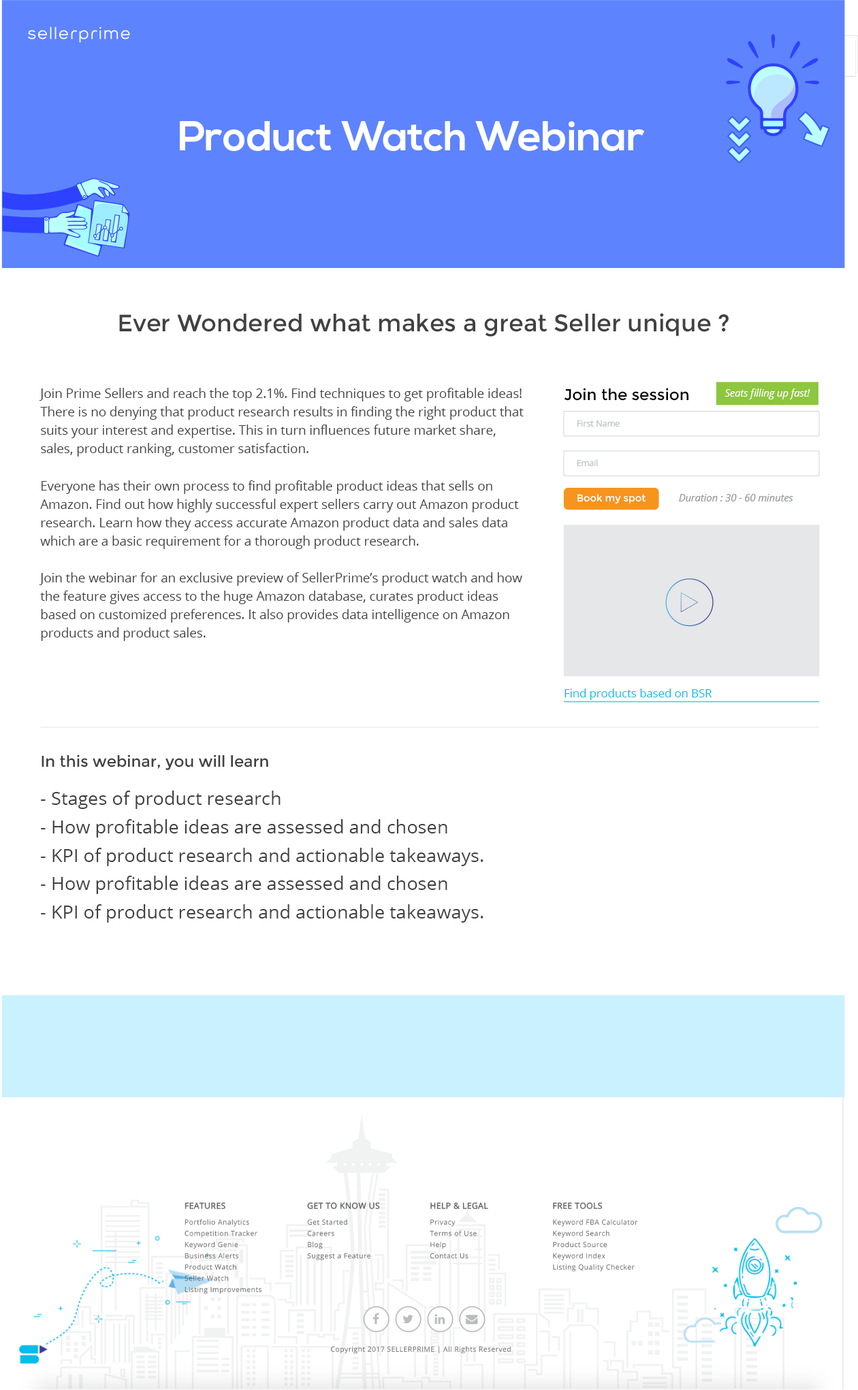
<style>
.page{position:relative;width:858px;height:1390px;background:#ffffff}
.page>*{position:absolute;margin:0}
.t1{font:41.4px "NexaBold";color:#ffffff}
.t2{font:23.9px "Montserrat-Regular";color:#414042}
.t3{font:12.8px/18.4px "OpenSans";color:#414042}
.t4{font:15.6px "Montserrat-Regular";color:#000000}
.t5{font:9.9px "OpenSans-Italic";color:#ffffff}
.t6{font:8.5px "OpenSans";color:#bcbec0}
.t7{font:9.9px "Montserrat-Regular";color:#ffffff}
.t8{font:9.9px "OpenSans-Italic";color:#939598}
.t9{font:11.3px "OpenSans";color:#06bbe5}
.t10{font:15.6px "Montserrat-Regular";color:#414042}
.t11{font:18.4px/28.4px "OpenSans";color:#414042}
</style>
<div class="page">
<p class="t1" style="left:180px;top:121px;width:465px;height:30px">Product Watch Webinar</p>
<p class="t2" style="left:119px;top:313px;width:609px;height:24px">Ever Wondered what makes a great Seller unique ?</p>
<p class="t3" style="left:39px;top:388px;width:484px;height:253px">Join Prime Sellers and reach the top 2.1%. Find techniques to get profitable ideas!<br>There is no denying that product research results in finding the right product that suits your interest and expertise. This in turn influences future market share, sales, product ranking, customer satisfaction.<br><br>Everyone has their own process to find profitable product ideas that sells on Amazon. Find out how highly successful expert sellers carry out Amazon product research. Learn how they access accurate Amazon product data and sales data which are a basic requirement for a thorough product research. <br><br>Join the webinar for an exclusive preview of SellerPrime’s product watch and how the feature gives access to the huge Amazon database, curates product ideas based on customized preferences. It also provides data intelligence on Amazon products and product sales.</p>
<p class="t4" style="left:564px;top:388px;width:124px;height:13px">Join the session</p>
<p class="t5" style="left:724px;top:389px;width:86px;height:11px">Seats filling up fast!</p>
<p class="t6" style="left:576px;top:421px;width:43px;height:6px">First Name</p>
<p class="t6" style="left:576px;top:459px;width:22px;height:7px">Email</p>
<p class="t7" style="left:577px;top:494px;width:69px;height:10px">Book my spot</p>
<p class="t8" style="left:679px;top:494px;width:114px;height:8px">Duration : 30 - 60 minutes</p>
<p class="t9" style="left:564px;top:689px;width:148px;height:11px">Find products based on BSR</p>
<p class="t10" style="left:42px;top:755px;width:226px;height:15px">In this webinar, you will learn</p>
<p class="t11" style="left:41px;top:791px;width:442px;height:132px">- Stages of product research<br>- How profitable ideas are assessed and chosen <br>- KPI of product research and actionable takeaways. <br>- How profitable ideas are assessed and chosen <br>- KPI of product research and actionable takeaways.</p>
</div>
